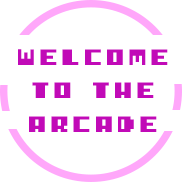
<style>
.page{position:relative;width:182px;height:182px;background:#ffffff}
.page>*{position:absolute;margin:0}
.t1{font:25px/33.3px "I-pixel-u";letter-spacing:0.14em;color:#c10ab7}
</style>
<div class="page">
<p class="t1" style="left:18px;top:49px;width:150px;height:83px;text-align:center">WELCOME<br>TO THE<br>ARCADE</p>
</div>
